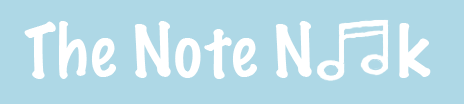
<style>
.page{position:relative;width:464px;height:104px;background:#aed8e6}
.page>*{position:absolute;margin:0}
.t1{font:66.7px "MarkerFelt-Thin";color:#ffffff}
</style>
<div class="page">
<p class="t1" style="left:24px;top:21px;width:407px;height:58px">The Note N     k</p>
</div>
